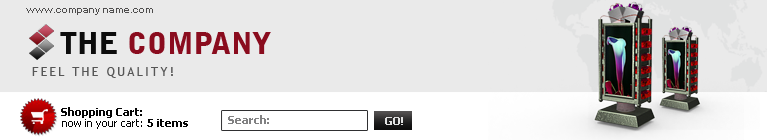
<style>
.page{position:relative;width:767px;height:140px;background:#eaeaea}
.page>*{position:absolute;margin:0}
.t1{font:10px "Arial-BoldMT";color:#4e4d4d}
.t2{font:30px "BellGothicBT-Black";color:#8a0c1e;text-transform:uppercase}
.t3{font:30px "BellGothicBT-Black";color:#0c0c0c;text-transform:uppercase}
.t4{font:12px "UltraVertex6";letter-spacing:0.2em;color:#565656;text-transform:uppercase}
.t5{font:11px "Tahoma-Bold";color:#050505}
.t6{font:11px "Tahoma";color:#040404}
.t7{font:11px "Tahoma-Bold";color:#040404}
.t8{font:11px "Tahoma-Bold";color:#818182}
.t9{font:11px "Tahoma-Bold";color:#e0e0e0;text-transform:uppercase}
</style>
<div class="page">
<p class="t1" style="left:26px;top:8px;width:127px;height:7px">www.company name.com</p>
<p class="t2" style="left:60px;top:32px;width:211px;height:22px"><span class="t3">the</span> company</p>
<p class="t4" style="left:32px;top:67px;width:141px;height:11px">Feel the quality!</p>
<p class="t5" style="left:61px;top:107px;width:81px;height:11px">Shopping Cart:</p>
<p class="t6" style="left:62px;top:119px;width:126px;height:10px">now in your cart: <span class="t7">5 items</span></p>
<p class="t8" style="left:228px;top:115px;width:41px;height:9px">Search:</p>
<p class="t9" style="left:385px;top:117px;width:18px;height:8px">GO!</p>
</div>
